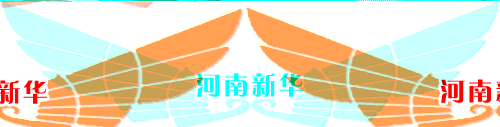
<style>
.page{position:relative;width:500px;height:127px;background:#ffffff}
.page>*{position:absolute;margin:0}
.t1{font:25px "GJJCQJW--GB1-0";letter-spacing:0.1em;color:#01ffff}
</style>
<div class="page">
<p class="t1" style="left:197px;top:72px;width:106px;height:24px">河南新华</p>
</div>
